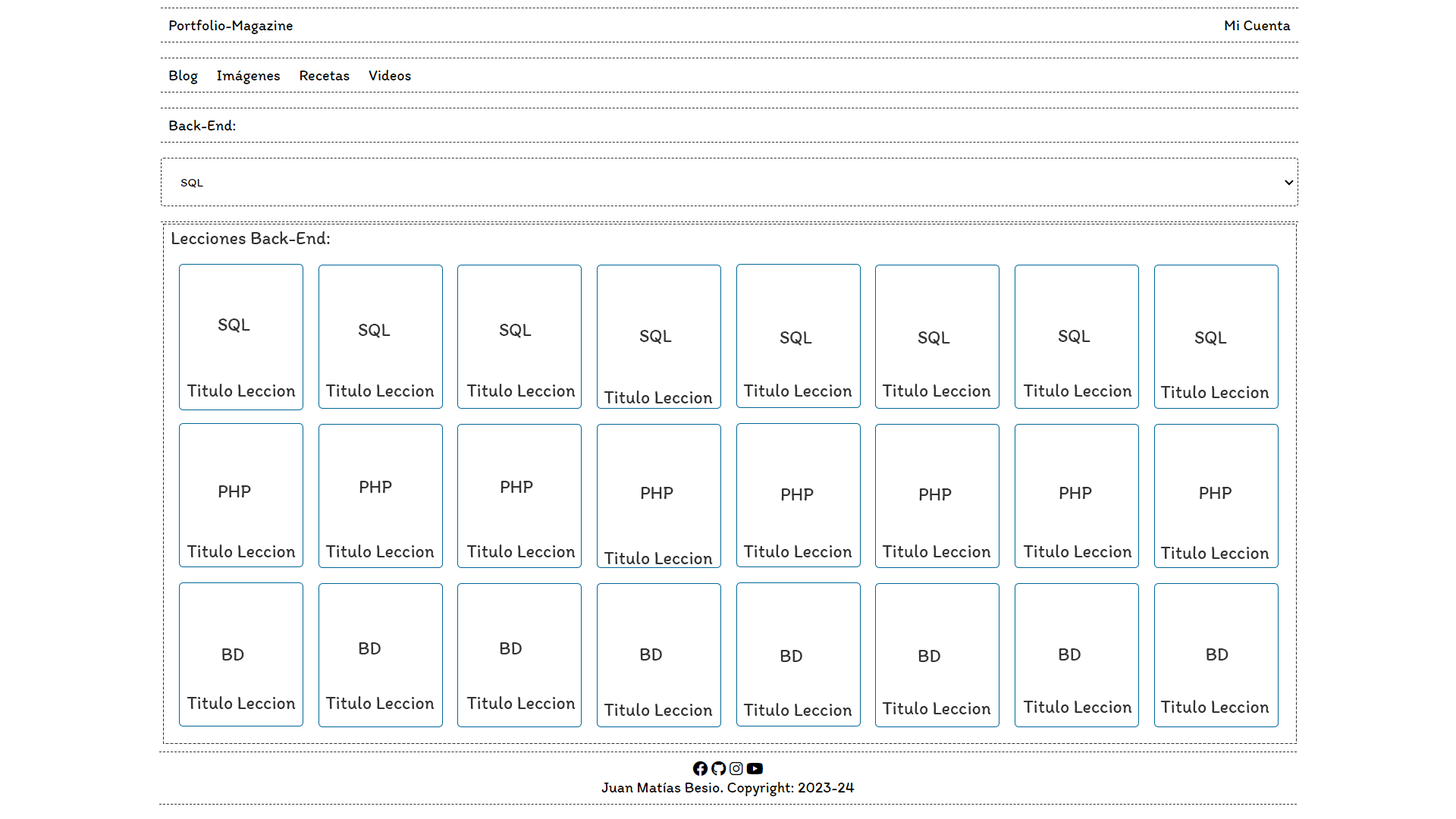
<style>
.page{position:relative;width:1456px;height:819px;background:#ffffff}
.page>*{position:absolute;margin:0}
.t1{font:18.2px "Itim-Regular";color:#333333}
</style>
<div class="page">
<p class="t1" style="left:171px;top:231px;width:159px;height:13px">Lecciones Back-End:</p>
<p class="t1" style="left:218px;top:318px;width:32px;height:15px">SQL</p>
<p class="t1" style="left:359px;top:324px;width:32px;height:14px">SQL</p>
<p class="t1" style="left:500px;top:324px;width:32px;height:14px">SQL</p>
<p class="t1" style="left:640px;top:330px;width:32px;height:14px">SQL</p>
<p class="t1" style="left:1059px;top:330px;width:31px;height:14px">SQL</p>
<p class="t1" style="left:780px;top:331px;width:32px;height:15px">SQL</p>
<p class="t1" style="left:918px;top:331px;width:32px;height:15px">SQL</p>
<p class="t1" style="left:1195px;top:331px;width:32px;height:15px">SQL</p>
<p class="t1" style="left:187px;top:384px;width:109px;height:13px">Titulo Leccion</p>
<p class="t1" style="left:325px;top:384px;width:110px;height:13px">Titulo Leccion</p>
<p class="t1" style="left:466px;top:384px;width:110px;height:13px">Titulo Leccion</p>
<p class="t1" style="left:743px;top:384px;width:109px;height:13px">Titulo Leccion</p>
<p class="t1" style="left:882px;top:384px;width:109px;height:13px">Titulo Leccion</p>
<p class="t1" style="left:1023px;top:384px;width:109px;height:13px">Titulo Leccion</p>
<p class="t1" style="left:1160px;top:385px;width:109px;height:13px">Titulo Leccion</p>
<p class="t1" style="left:604px;top:391px;width:109px;height:12px">Titulo Leccion</p>
<p class="t1" style="left:218px;top:485px;width:33px;height:12px">PHP</p>
<p class="t1" style="left:359px;top:481px;width:33px;height:12px">PHP</p>
<p class="t1" style="left:500px;top:481px;width:33px;height:12px">PHP</p>
<p class="t1" style="left:641px;top:487px;width:32px;height:12px">PHP</p>
<p class="t1" style="left:781px;top:488px;width:33px;height:12px">PHP</p>
<p class="t1" style="left:919px;top:488px;width:33px;height:12px">PHP</p>
<p class="t1" style="left:1059px;top:487px;width:33px;height:12px">PHP</p>
<p class="t1" style="left:1200px;top:487px;width:32px;height:12px">PHP</p>
<p class="t1" style="left:187px;top:544px;width:109px;height:13px">Titulo Leccion</p>
<p class="t1" style="left:325px;top:544px;width:110px;height:13px">Titulo Leccion</p>
<p class="t1" style="left:466px;top:544px;width:110px;height:13px">Titulo Leccion</p>
<p class="t1" style="left:743px;top:544px;width:109px;height:13px">Titulo Leccion</p>
<p class="t1" style="left:882px;top:544px;width:109px;height:13px">Titulo Leccion</p>
<p class="t1" style="left:1023px;top:544px;width:109px;height:13px">Titulo Leccion</p>
<p class="t1" style="left:1160px;top:546px;width:109px;height:13px">Titulo Leccion</p>
<p class="t1" style="left:604px;top:551px;width:109px;height:13px">Titulo Leccion</p>
<p class="t1" style="left:222px;top:648px;width:22px;height:12px">BD</p>
<p class="t1" style="left:359px;top:642px;width:22px;height:12px">BD</p>
<p class="t1" style="left:500px;top:642px;width:22px;height:12px">BD</p>
<p class="t1" style="left:640px;top:648px;width:22px;height:12px">BD</p>
<p class="t1" style="left:780px;top:650px;width:22px;height:12px">BD</p>
<p class="t1" style="left:918px;top:650px;width:22px;height:12px">BD</p>
<p class="t1" style="left:1059px;top:648px;width:22px;height:12px">BD</p>
<p class="t1" style="left:1206px;top:648px;width:22px;height:12px">BD</p>
<p class="t1" style="left:187px;top:696px;width:109px;height:13px">Titulo Leccion</p>
<p class="t1" style="left:325px;top:696px;width:110px;height:13px">Titulo Leccion</p>
<p class="t1" style="left:466px;top:696px;width:110px;height:13px">Titulo Leccion</p>
<p class="t1" style="left:882px;top:701px;width:109px;height:13px">Titulo Leccion</p>
<p class="t1" style="left:1023px;top:700px;width:109px;height:13px">Titulo Leccion</p>
<p class="t1" style="left:1160px;top:700px;width:109px;height:13px">Titulo Leccion</p>
<p class="t1" style="left:604px;top:703px;width:109px;height:13px">Titulo Leccion</p>
<p class="t1" style="left:743px;top:703px;width:109px;height:13px">Titulo Leccion</p>
</div>
